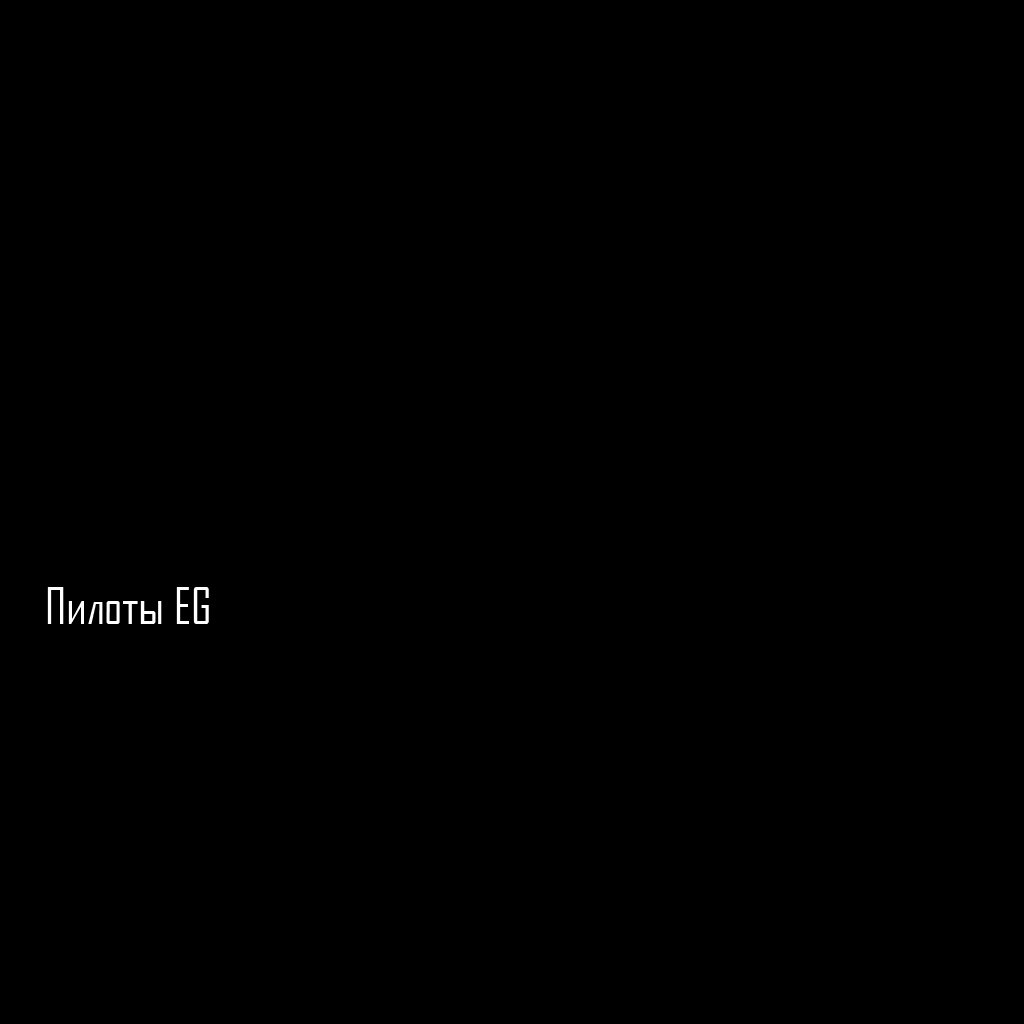
<style>
.page{position:relative;width:1024px;height:1024px;background:#000000}
.page>*{position:absolute;margin:0}
.t1{font:48px "AgencyFBCyrillic";color:#ffffff}
</style>
<div class="page">
<p class="t1" style="left:47px;top:587px;width:162px;height:37px">Пилоты EG</p>
</div>
